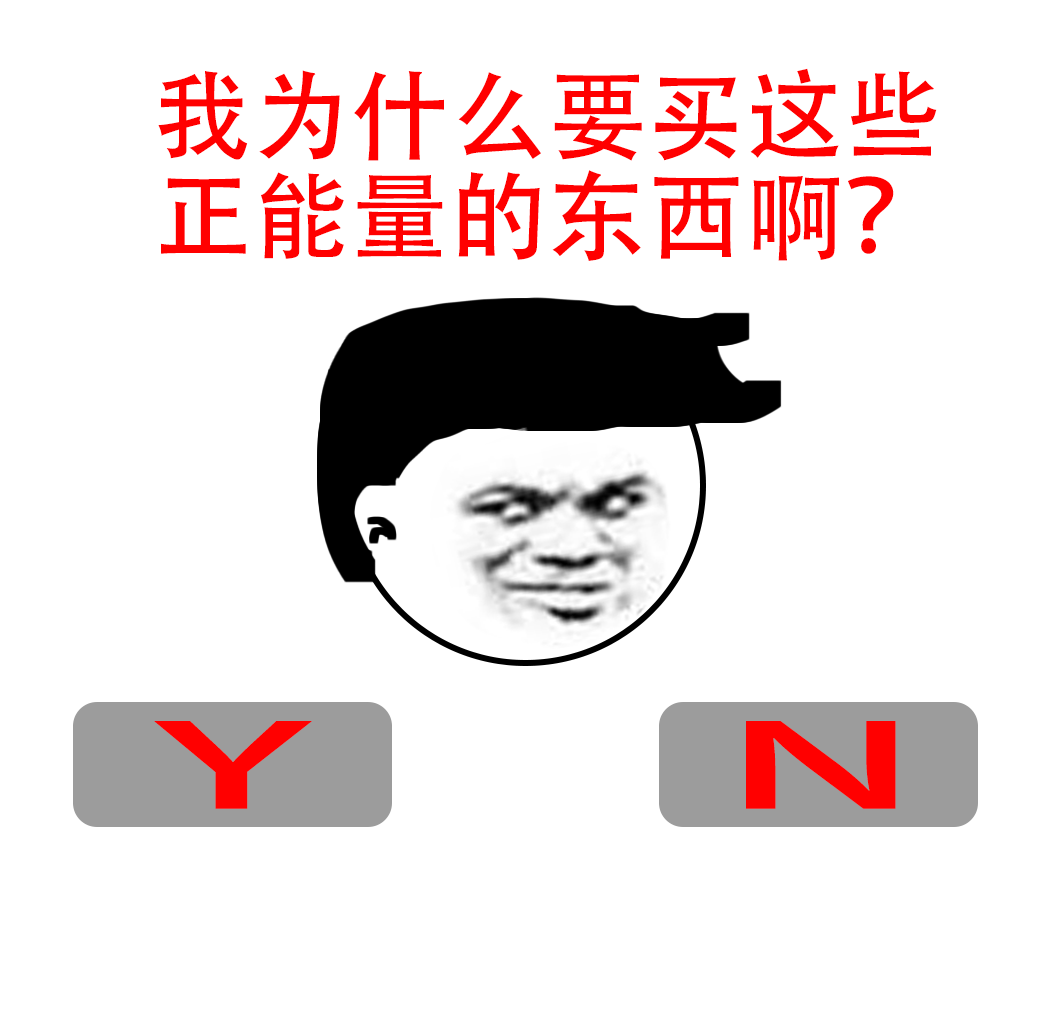
<style>
.page{position:relative;width:1052px;height:1026px;background:#ffffff}
.page>*{position:absolute;margin:0}
.t1{font:98.1px/100px "AdobeHeitiStd-Regular";letter-spacing:0.005em;color:#ff0000}
</style>
<div class="page">
<p class="t1" style="left:158px;top:68px;width:779px;height:193px;text-align:center">我为什么要买这些<br>正能量的东西啊？</p>
</div>
